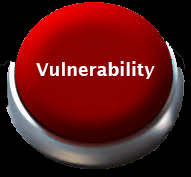
<style>
.page{position:relative;width:191px;height:177px;background:#000000}
.page>*{position:absolute;margin:0}
.t1{font:18px "LucidaSans-Demi";color:#ffffff}
</style>
<div class="page">
<p class="t1" style="left:36px;top:61px;width:119px;height:18px">Vulnerability</p>
</div>
